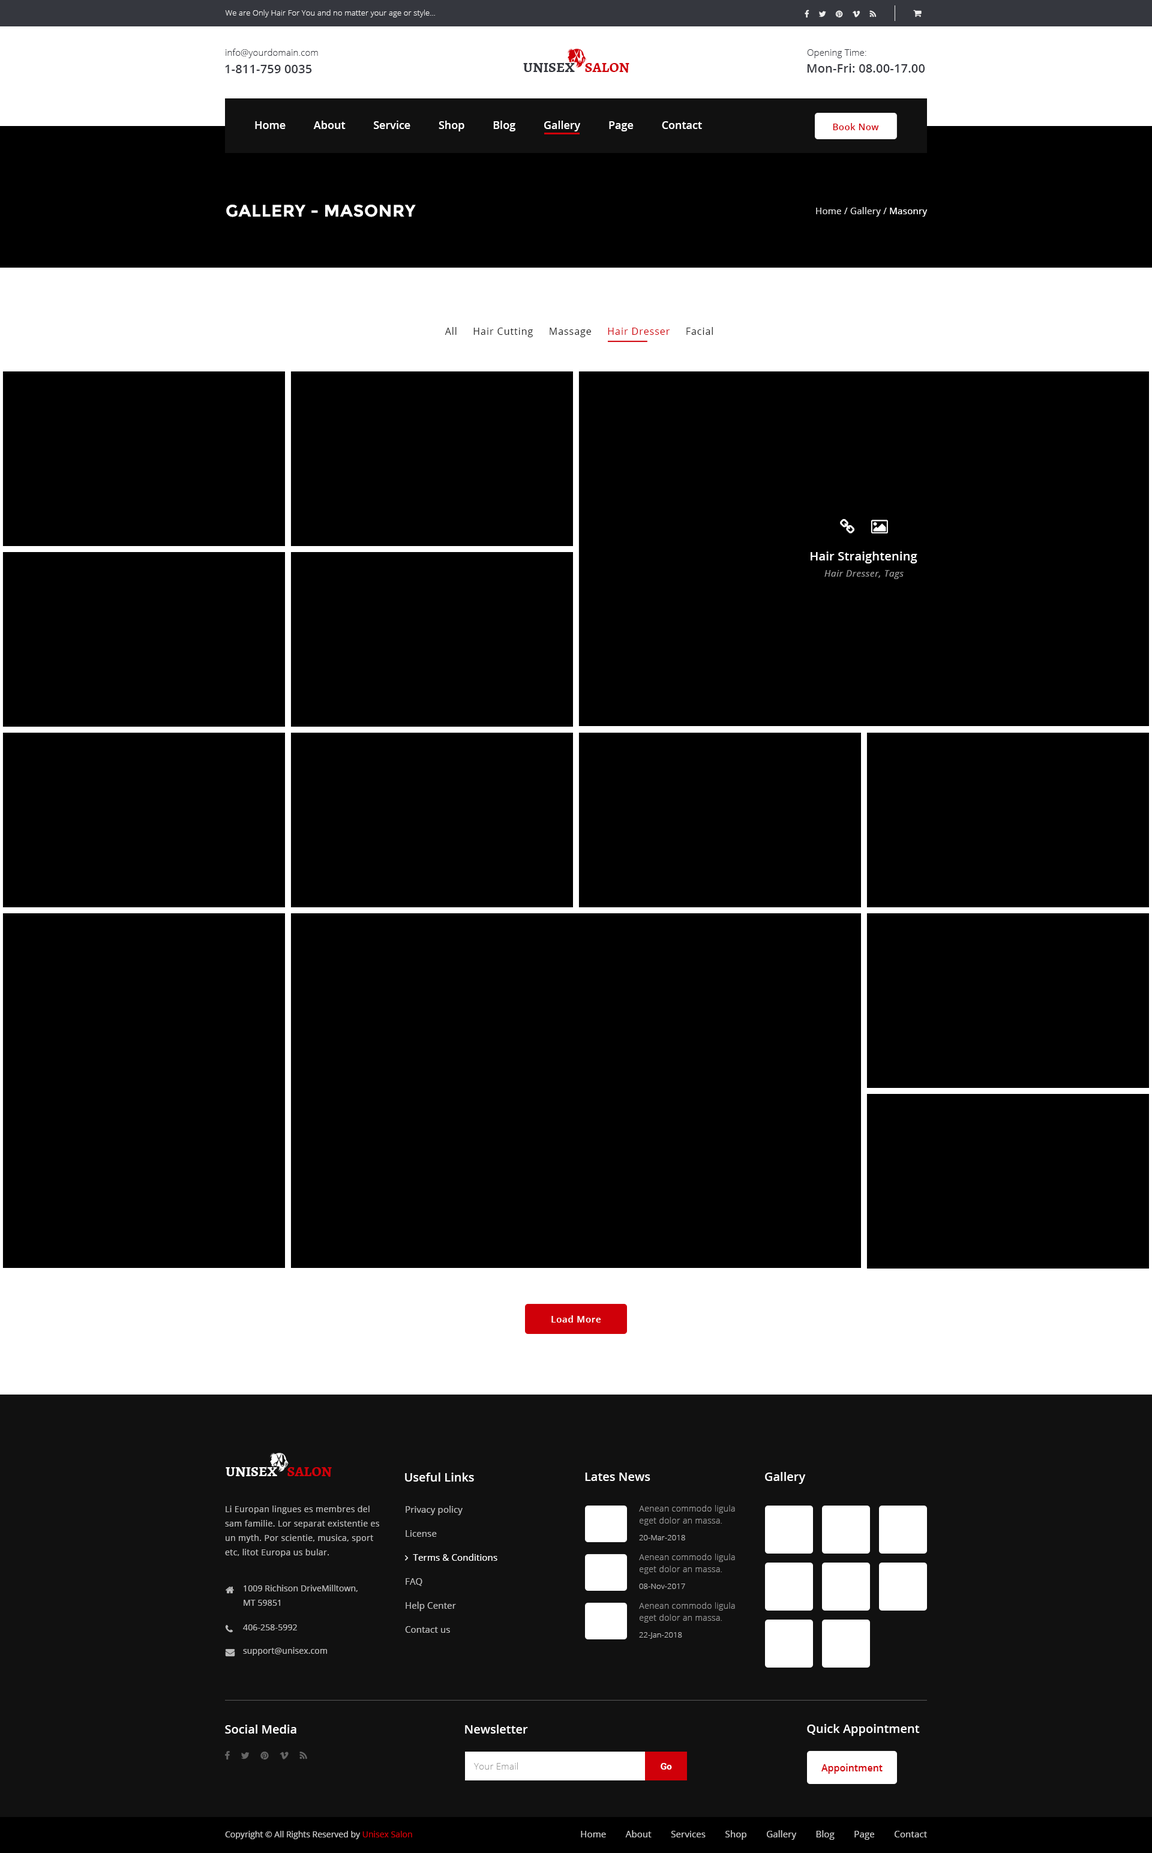
<style>
.page{position:relative;width:1152px;height:1853px;background:#000000}
.page>*{position:absolute;margin:0}
.t1{font:7.8px "OpenSans-Light";letter-spacing:0.01em;color:#efefef}
.t2{font:9px "OpenSans-Light";letter-spacing:0.01em;color:#35373e}
.t3{font:12px "OpenSans-Semibold";letter-spacing:0.01em;color:#35373e}
.t4{font:14.4px "Alegreya-Bold";color:#35373e;text-transform:uppercase}
.t5{font:14.4px "Alegreya-Bold";color:#d00009;text-transform:uppercase}
.t6{font:10.8px "OpenSans-Semibold";color:#ffffff}
.t7{font:9px "OpenSans-Semibold";letter-spacing:0.03em;color:#d00009}
.t8{font:16.8px "Montserrat-Bold";letter-spacing:0.02em;color:#ffffff;text-transform:uppercase}
.t9{font:9px "OpenSans";letter-spacing:0.02em;color:#dddddd}
.t10{font:9px "OpenSans";letter-spacing:0.02em;color:#ffffff}
.t11{font:9.6px "OpenSans";letter-spacing:0.06em;color:#222222}
.t12{font:9.6px "OpenSans";letter-spacing:0.06em;color:#d00009}
.t13{font:12px "OpenSans-Semibold";letter-spacing:0.01em;color:#ffffff}
.t14{font:9px "OpenSans-Italic";letter-spacing:0.05em;color:#999999}
.t15{font:9px "OpenSans-Semibold";letter-spacing:0.05em;color:#ffffff}
.t16{font:14.4px "Alegreya-Bold";color:#ffffff;text-transform:uppercase}
.t17{font:12px "OpenSans-Semibold";color:#ffffff}
.t18{font:8.4px/14.4px "OpenSans";letter-spacing:0.03em;color:#bbbbbb}
.t19{font:8.4px/12px "OpenSans-Light";letter-spacing:0.03em;color:#999999}
.t20{font:7.8px "OpenSans-Light";letter-spacing:0.01em;color:#bbbbbb}
.t21{font:8.4px/14.4px "OpenSans";letter-spacing:0.01em;color:#bbbbbb}
.t22{font:8.4px "OpenSans";letter-spacing:0.01em;color:#bbbbbb}
.t23{font:9px "OpenSans-Light";letter-spacing:0.02em;color:#999999}
.t24{font:9px "RobotoSlab-Bold";letter-spacing:0.02em;color:#ffffff}
.t25{font:9.6px "OpenSans-Semibold";color:#d00009}
.t26{font:9px "OpenSans";letter-spacing:0.01em;color:#cccccc}
.t27{font:8.4px "OpenSans";color:#cccccc}
.t28{font:8.4px "OpenSans";color:#d00009}
</style>
<div class="page">
<p class="t1" style="left:225px;top:10px;width:210px;height:7px">We are Only Hair For You and no matter your age or style...</p>
<p class="t2" style="left:226px;top:49px;width:92px;height:9px">info@yourdomain.com</p>
<p class="t2" style="left:807px;top:49px;width:59px;height:9px">Opening Time:</p>
<p class="t3" style="left:225px;top:65px;width:87px;height:8px">1-811-759 0035</p>
<p class="t4" style="left:523px;top:62px;width:106px;height:11px">Unisex    <span class="t5">Salon</span></p>
<p class="t3" style="left:807px;top:64px;width:118px;height:9px">Mon-Fri: 08.00-17.00</p>
<p class="t6" style="left:255px;top:121px;width:447px;height:10px">Home          About          Service          Shop          Blog          Gallery          Page          Contact</p>
<p class="t7" style="left:833px;top:123px;width:46px;height:7px">Book Now</p>
<p class="t8" style="left:226px;top:205px;width:190px;height:12px">Gallery - Masonry</p>
<p class="t9" style="left:816px;top:207px;width:112px;height:10px">Home / Gallery / <span class="t10">Masonry</span></p>
<p class="t11" style="left:445px;top:327px;width:268px;height:10px">All     Hair Cutting     Massage     <span class="t12">Hair Dresser</span>     Facial</p>
<p class="t13" style="left:811px;top:551px;width:106px;height:12px">Hair Straightening</p>
<p class="t14" style="left:824px;top:570px;width:80px;height:9px">Hair Dresser, Tags</p>
<p class="t15" style="left:551px;top:1315px;width:50px;height:7px">Load More</p>
<p class="t16" style="left:226px;top:1466px;width:106px;height:11px">Unisex    <span class="t5">Salon</span></p>
<p class="t17" style="left:405px;top:1472px;width:69px;height:9px">Useful Links</p>
<p class="t17" style="left:585px;top:1472px;width:65px;height:9px">Lates News</p>
<p class="t17" style="left:765px;top:1472px;width:41px;height:12px">Gallery</p>
<p class="t18" style="left:225px;top:1505px;width:154px;height:52px">Li Europan lingues es membres del sam familie. Lor separat existentie es un myth. Por scientie, musica, sport etc, litot Europa us bular.</p>
<p class="t19" style="left:639px;top:1505px;width:96px;height:20px">Aenean commodo ligula eget dolor an massa.</p>
<p class="t20" style="left:639px;top:1535px;width:46px;height:5px">20-Mar-2018</p>
<p class="t19" style="left:639px;top:1553px;width:96px;height:21px">Aenean commodo ligula eget dolor an massa.</p>
<p class="t21" style="left:244px;top:1585px;width:114px;height:21px">1009 Richison DriveMilltown, <br>MT 59851</p>
<p class="t20" style="left:639px;top:1583px;width:46px;height:6px">08-Nov-2017</p>
<p class="t19" style="left:639px;top:1602px;width:96px;height:20px">Aenean commodo ligula eget dolor an massa.</p>
<p class="t22" style="left:243px;top:1624px;width:54px;height:6px">406-258-5992</p>
<p class="t20" style="left:639px;top:1632px;width:43px;height:7px">22-Jan-2018</p>
<p class="t22" style="left:243px;top:1647px;width:84px;height:8px">support@unisex.com</p>
<p class="t17" style="left:225px;top:1724px;width:71px;height:9px">Social Media</p>
<p class="t17" style="left:465px;top:1724px;width:63px;height:9px">Newsletter</p>
<p class="t17" style="left:807px;top:1724px;width:113px;height:12px">Quick Appointment</p>
<p class="t23" style="left:474px;top:1762px;width:44px;height:7px">Your Email</p>
<p class="t24" style="left:661px;top:1763px;width:11px;height:6px">Go</p>
<p class="t25" style="left:821px;top:1763px;width:62px;height:11px">Appointment</p>
<p class="t26" style="left:581px;top:1830px;width:346px;height:10px">Home        About        Services        Shop        Gallery        Blog        Page        Contact</p>
<p class="t27" style="left:225px;top:1831px;width:187px;height:8px">Copyright © All Rights Reserved by <span class="t28">Unisex Salon</span></p>
</div>
